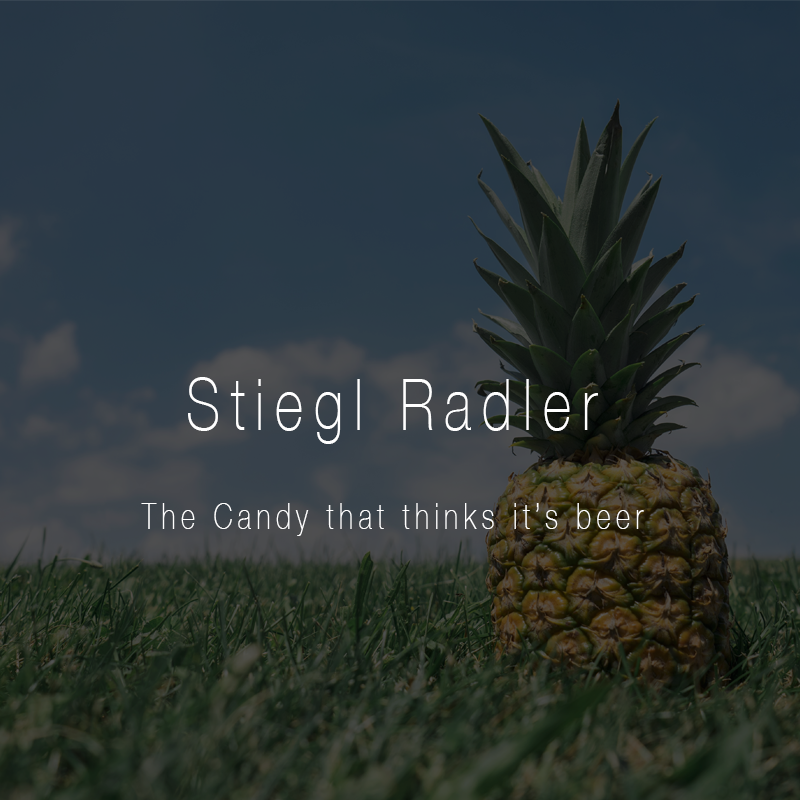
<style>
.page{position:relative;width:800px;height:800px}
.page>*{position:absolute;margin:0}
.t1{font:72px "HelveticaNeue-Thin";letter-spacing:0.2em;color:#ffffff;scale:0.75 1}
.t2{font:36px "HelveticaNeue-Thin";letter-spacing:0.2em;color:#ffffff;scale:0.75 1}
</style>
<div class="page">
<p class="t1" style="left:188px;top:377px;width:410px;height:67px">Stiegl Radler</p>
<p class="t2" style="left:141px;top:503px;width:503px;height:33px">The Candy that thinks it’s beer</p>
</div>
